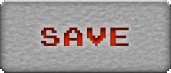
<style>
.page{position:relative;width:171px;height:73px}
.page>*{position:absolute;margin:0}
.t1{font:21px "Nintendo-NES-Font";letter-spacing:0.1em}
</style>
<div class="page">
<p class="t1" style="left:41px;top:27px;width:88px;height:19px">SAVE</p>
</div>
